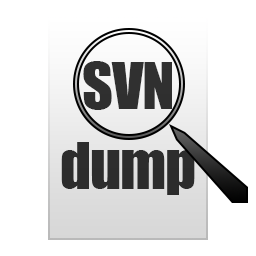
<style>
.page{position:relative;width:256px;height:256px;background:#ffffff}
.page>*{position:absolute;margin:0}
.t1{font:60px/80px "Impact";letter-spacing:-0.02em;color:#323232}
</style>
<div class="page">
<p class="t1" style="left:61px;top:61px;width:134px;height:134px;text-align:center">SVN<br>dump</p>
</div>
